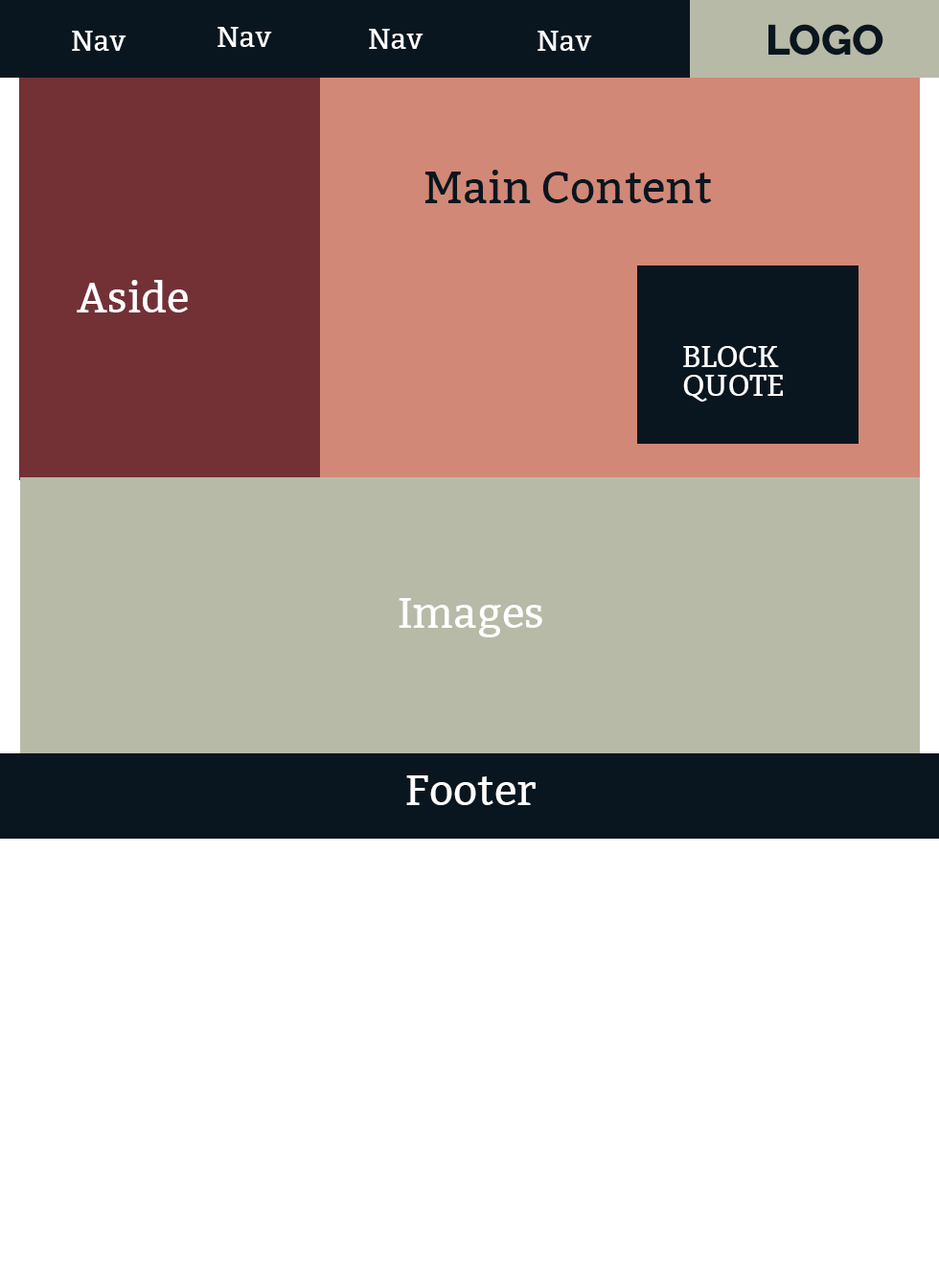
<style>
.page{position:relative;width:939px;height:1269px;background:#ffffff}
.page>*{position:absolute;margin:0}
.t1{font:28.8px "Bitter-Regular";color:#ffffff}
.t2{font:42.2px "Raleway-ExtraBold";color:#09161f}
.t3{font:44.1px "Bitter-Regular";color:#09161f}
.t4{font:42.2px "Bitter-Regular";color:#ffffff}
.t5{font:29.3px/28.3px "Bitter-Regular";color:#ffffff}
</style>
<div class="page">
<p class="t1" style="left:218px;top:27px;width:54px;height:20px">Nav</p>
<p class="t1" style="left:369px;top:29px;width:55px;height:20px">Nav</p>
<p class="t2" style="left:769px;top:24px;width:115px;height:32px">LOGO</p>
<p class="t1" style="left:72px;top:31px;width:55px;height:20px">Nav</p>
<p class="t1" style="left:538px;top:31px;width:54px;height:20px">Nav</p>
<p class="t3" style="left:425px;top:170px;width:287px;height:33px">Main Content</p>
<p class="t4" style="left:77px;top:280px;width:111px;height:33px">Aside</p>
<p class="t5" style="left:684px;top:346px;width:99px;height:56px">BLOCK <br>QUOTE</p>
<p class="t4" style="left:399px;top:598px;width:144px;height:40px">Images</p>
<p class="t4" style="left:406px;top:776px;width:130px;height:29px">Footer</p>
</div>
